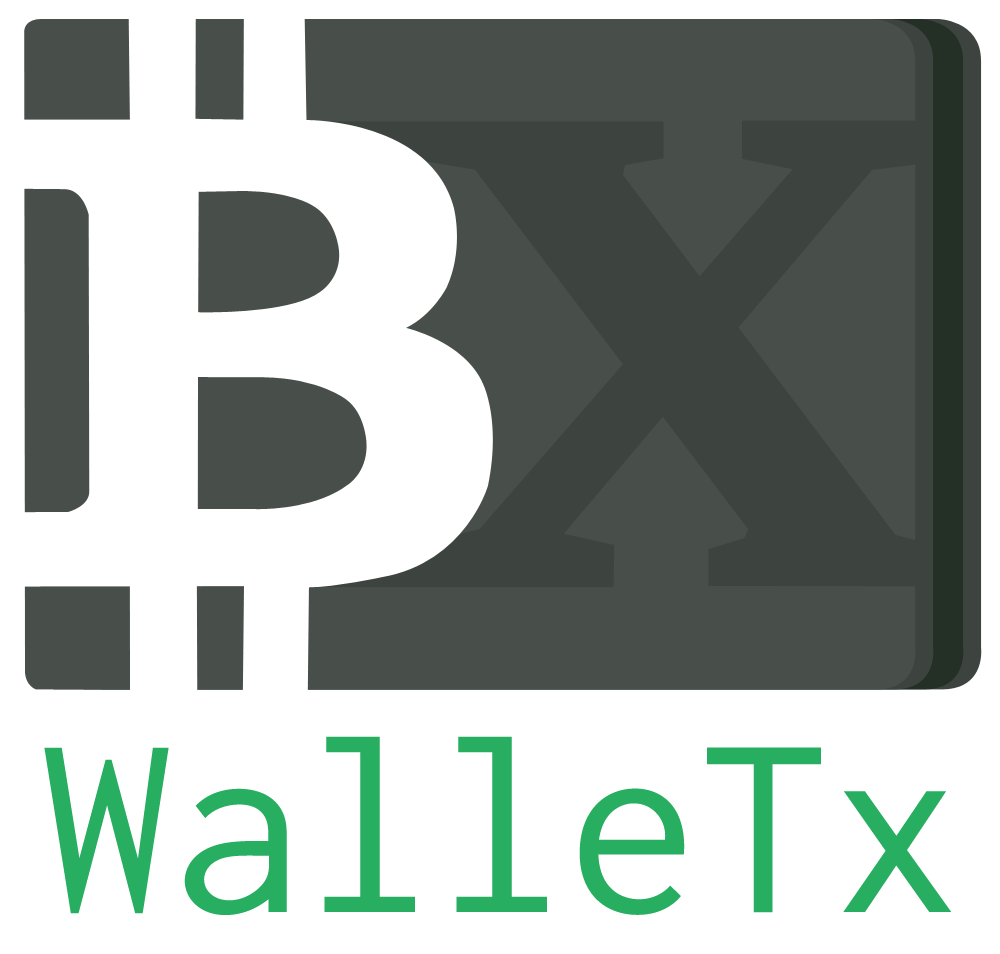
<style>
.page{position:relative;width:1000px;height:954px;background:#ffffff}
.page>*{position:absolute;margin:0}
.t1{font:263.5px "Inconsolata";color:#27ae60}
</style>
<div class="page">
<p class="t1" style="left:44px;top:736px;width:908px;height:179px">WalleTx</p>
</div>
